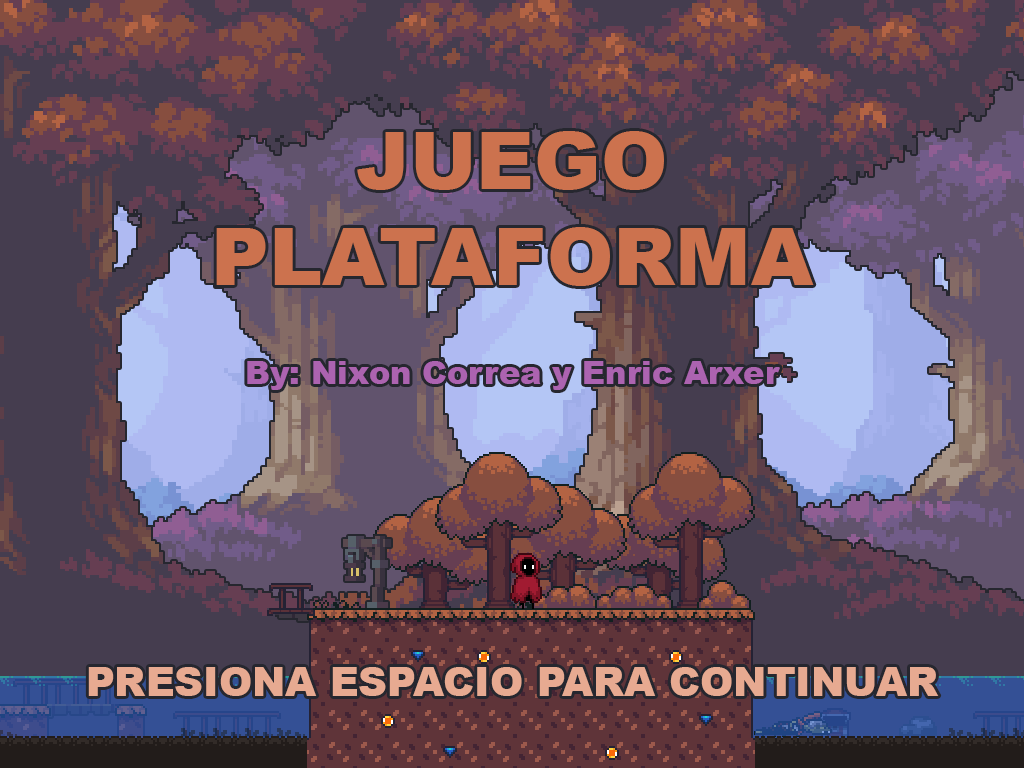
<style>
.page{position:relative;width:1024px;height:768px;background:#453d4f}
.page>*{position:absolute;margin:0}
.t1{font:80px "Arial-Black";color:#cc724e}
.t2{font:32px "Arial-Black";color:#ac63b0}
.t3{font:40px "Arial-Black";color:#e7aa91}
</style>
<div class="page">
<p class="t1" style="left:216px;top:131px;width:598px;height:155px;text-align:center">JUEGO <br>PLATAFORMA</p>
<p class="t2" style="left:247px;top:361px;width:533px;height:29px">By: Nixon Correa y Enric Arxer</p>
<p class="t3" style="left:88px;top:667px;width:851px;height:29px">PRESIONA ESPACIO PARA CONTINUAR</p>
</div>
